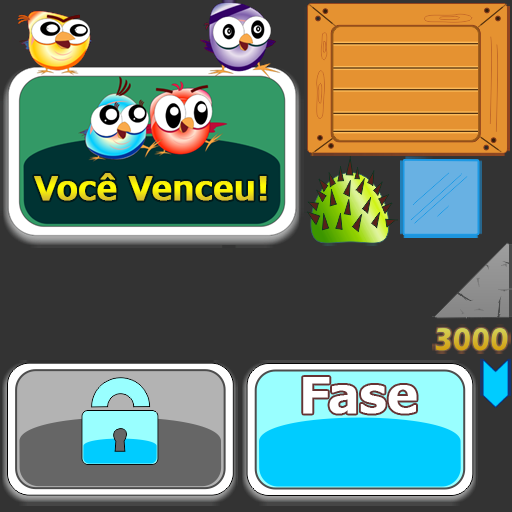
<style>
.page{position:relative;width:512px;height:512px;background:#333333}
.page>*{position:absolute;margin:0}
.t1{font:32px "Meiryo-Bold";font-weight:bold}
.t2{font:48px "Meiryo-Bold";color:#ffffff;font-weight:bold}
</style>
<div class="page">
<p class="t1" style="left:34px;top:173px;width:233px;height:28px">Você Venceu!</p>
<p class="t2" style="left:303px;top:377px;width:114px;height:37px">Fase</p>
</div>
